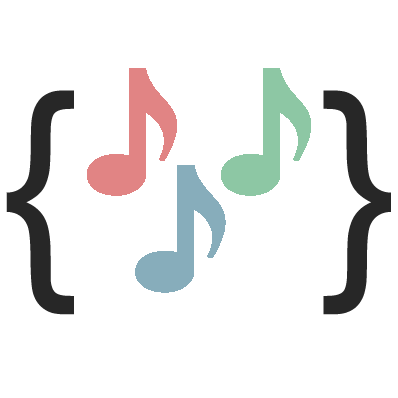
<style>
.page{position:relative;width:398px;height:398px;background:#ffffff}
.page>*{position:absolute;margin:0}
.t1{font:238.5px "ArialMT";text-transform:uppercase}
.t2{font:238.5px "EmojiOneColor";text-transform:uppercase}
</style>
<div class="page">
<p class="t1" style="left:6px;top:68px;width:385px;height:247px">{<span class="t2">🎶</span>}</p>
</div>
